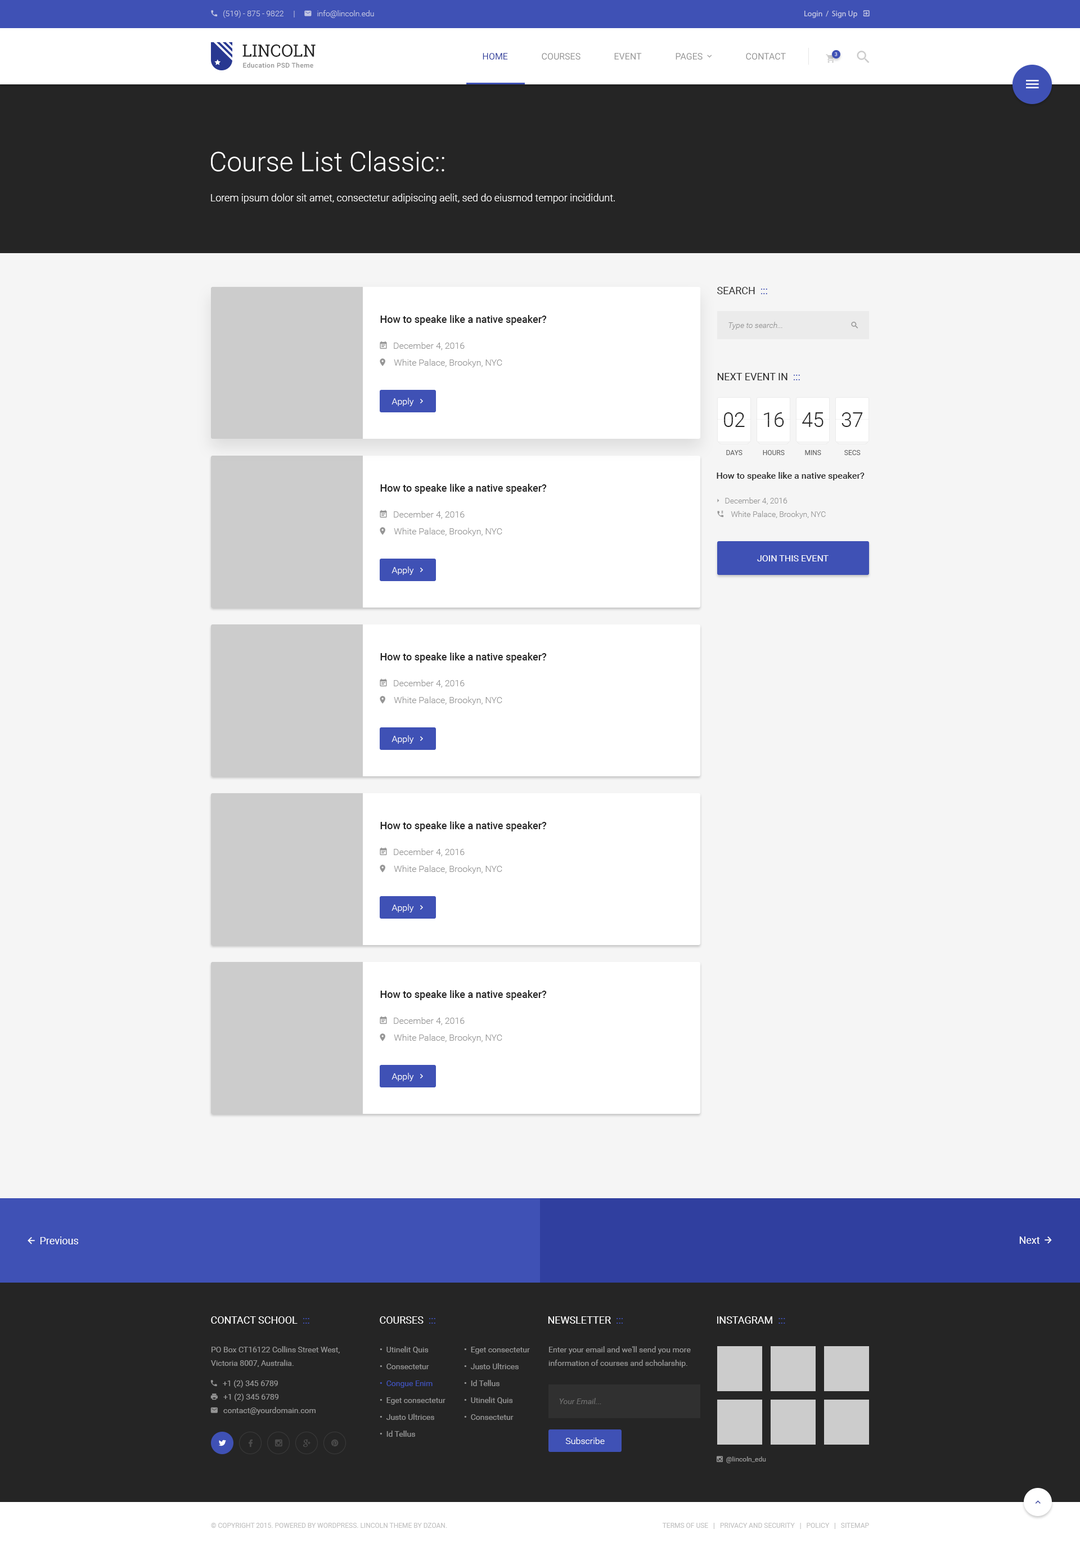
<style>
.page{position:relative;width:1080px;height:1547px;background:#f5f5f5}
.page>*{position:absolute;margin:0}
.t1{font:16.9px "RobotoSlab-Regular";color:#252525;text-transform:uppercase}
.t2{font:9px "Roboto-Regular";color:#303f9f;text-transform:uppercase}
.t3{font:9px "Roboto-Regular";color:#959595;text-transform:uppercase}
.t4{font:5.1px "Roboto-Regular";text-transform:uppercase}
.t5{font:6.8px "Roboto-Medium";letter-spacing:0.03em;color:#959595}
.t6{font:27px "Roboto-Light";color:#ffffff}
.t7{font:10.1px "Roboto-Light";color:#ffffff}
.t8{font:10.1px "Roboto-Regular";color:#252525;text-transform:uppercase}
.t9{font:10.1px "Roboto-Regular";color:#3f51b5;text-transform:uppercase}
.t10{font:10.1px "Roboto-Medium";color:#252525}
.t11{font:7.9px "Roboto-LightItalic";color:#959595}
.t12{font:20.2px "Roboto-Light";color:#252525;text-transform:uppercase}
.t13{font:6.8px "Roboto-Regular";color:#636363;text-transform:uppercase}
.t14{font:9px "Roboto-Medium";color:#252525}
.t15{font:9px "Roboto-Regular";color:#ffffff;text-transform:uppercase}
.t16{font:10.1px "Roboto-Regular";color:#ffffff;text-transform:uppercase}
.t17{font:7.9px/16.9px "Roboto-Regular";color:#959595}
.t18{font:7.9px/16.9px "Roboto-Regular";color:#3f51b5}
.t19{font:7.9px/13.5px "Roboto-Regular";color:#959595}
.t20{font:7.9px "Roboto-Italic";color:#6c6c6c}
.t21{font:9px "Roboto-Light";color:#ffffff}
.t22{font:6.8px "Roboto-Regular";color:#c2c2c2;text-transform:uppercase}
</style>
<div class="page">
<p class="t1" style="left:242px;top:44px;width:74px;height:13px">Lincoln</p>
<p class="t2" style="left:483px;top:53px;width:25px;height:7px">Home</p>
<p class="t3" style="left:542px;top:53px;width:38px;height:7px">Courses</p>
<p class="t3" style="left:614px;top:53px;width:28px;height:7px">Event</p>
<p class="t3" style="left:746px;top:53px;width:40px;height:7px">Contact</p>
<p class="t4" style="left:835px;top:52px;width:3px;height:4px">3</p>
<p class="t5" style="left:243px;top:62px;width:70px;height:6px">Education PSD Theme</p>
<p class="t6" style="left:211px;top:151px;width:233px;height:21px">Course List Classic::</p>
<p class="t7" style="left:211px;top:194px;width:404px;height:10px">Lorem ipsum dolor sit amet, consectetur adipiscing aelit, sed do eiusmod tempor incididunt.</p>
<p class="t8" style="left:717px;top:287px;width:50px;height:7px">Search  <span class="t9">:::</span></p>
<p class="t10" style="left:380px;top:315px;width:167px;height:10px">How to speake like a native speaker?</p>
<p class="t11" style="left:728px;top:322px;width:54px;height:8px">Type to search...</p>
<p class="t8" style="left:717px;top:373px;width:83px;height:7px">Next event in  <span class="t9">:::</span></p>
<p class="t12" style="left:724px;top:412px;width:21px;height:15px">02</p>
<p class="t12" style="left:764px;top:412px;width:20px;height:15px">16</p>
<p class="t12" style="left:802px;top:412px;width:22px;height:15px">45</p>
<p class="t12" style="left:842px;top:412px;width:21px;height:15px">37</p>
<p class="t13" style="left:726px;top:450px;width:16px;height:5px">Days</p>
<p class="t13" style="left:763px;top:450px;width:22px;height:5px">Hours</p>
<p class="t13" style="left:805px;top:450px;width:16px;height:5px">Mins</p>
<p class="t13" style="left:844px;top:450px;width:17px;height:5px">Secs</p>
<p class="t14" style="left:717px;top:472px;width:148px;height:8px">How to speake like a native speaker?</p>
<p class="t10" style="left:380px;top:484px;width:167px;height:10px">How to speake like a native speaker?</p>
<p class="t15" style="left:757px;top:555px;width:72px;height:6px">Join This Event</p>
<p class="t10" style="left:380px;top:652px;width:167px;height:11px">How to speake like a native speaker?</p>
<p class="t10" style="left:380px;top:821px;width:167px;height:10px">How to speake like a native speaker?</p>
<p class="t10" style="left:380px;top:990px;width:167px;height:10px">How to speake like a native speaker?</p>
<p class="t16" style="left:211px;top:1316px;width:98px;height:8px">Contact School  <span class="t9">:::</span></p>
<p class="t16" style="left:380px;top:1316px;width:55px;height:8px">Courses  <span class="t9">:::</span></p>
<p class="t16" style="left:548px;top:1316px;width:75px;height:8px">Newsletter  <span class="t9">:::</span></p>
<p class="t16" style="left:717px;top:1316px;width:68px;height:8px">Instagram  <span class="t9">:::</span></p>
<p class="t17" style="left:380px;top:1346px;width:66px;height:91px">•  Utinelit Quis<br>•  Consectetur<br><span class="t18">•  Congue Enim<br></span>•  Eget consectetur<br>•  Justo Ultrices<br>•  Id Tellus</p>
<p class="t17" style="left:464px;top:1347px;width:66px;height:73px">•  Eget consectetur<br>•  Justo Ultrices<br>•  Id Tellus<br>•  Utinelit Quis<br>•  Consectetur</p>
<p class="t19" style="left:548px;top:1346px;width:143px;height:21px">Enter your email and we'll send you more information of courses and scholarship.</p>
<p class="t20" style="left:559px;top:1398px;width:42px;height:6px">Your Email...</p>
<p class="t21" style="left:565px;top:1437px;width:40px;height:7px">Subscribe</p>
<p class="t22" style="left:211px;top:1523px;width:236px;height:5px">© Copyright 2015. Powered by WordPress. Lincoln Theme by DZOAN.</p>
<p class="t22" style="left:662px;top:1523px;width:207px;height:6px">Terms of Use   |   Privacy and Security   |   Policy   |   Sitemap</p>
</div>
